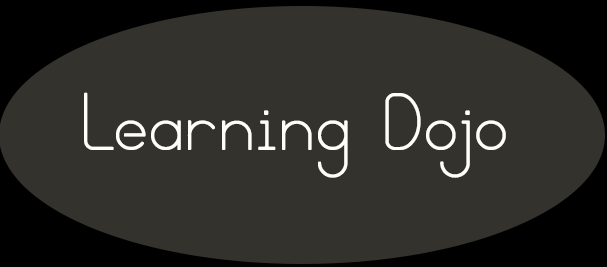
<style>
.page{position:relative;width:607px;height:267px;background:#33322d}
.page>*{position:absolute;margin:0}
.t1{font:72px "BloomingGrove";color:#ffffff}
</style>
<div class="page">
<p class="t1" style="left:84px;top:92px;width:422px;height:86px">Learning Dojo</p>
</div>
